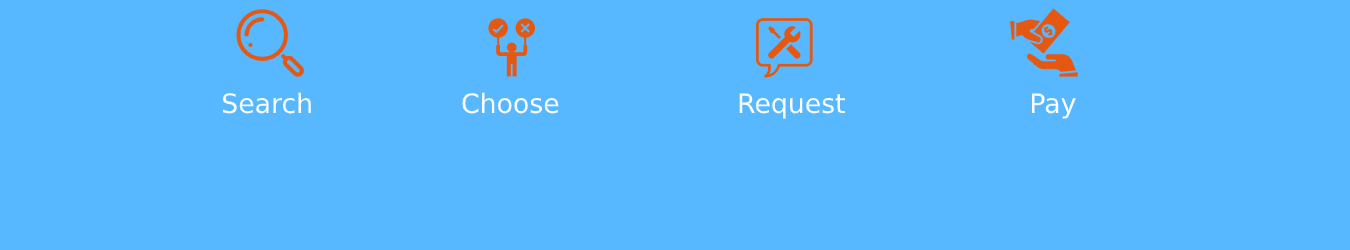
<style>
.page{position:relative;width:1350px;height:250px;background:#57b8ff}
.page>*{position:absolute;margin:0}
.t1{font:26.8px "DejaVuSans";color:#ffffff}
</style>
<div class="page">
<p class="t1" style="left:223px;top:92px;width:88px;height:22px">Search</p>
<p class="t1" style="left:462px;top:92px;width:97px;height:22px">Choose</p>
<p class="t1" style="left:739px;top:93px;width:106px;height:26px">Request</p>
<p class="t1" style="left:1032px;top:93px;width:44px;height:26px">Pay</p>
</div>
